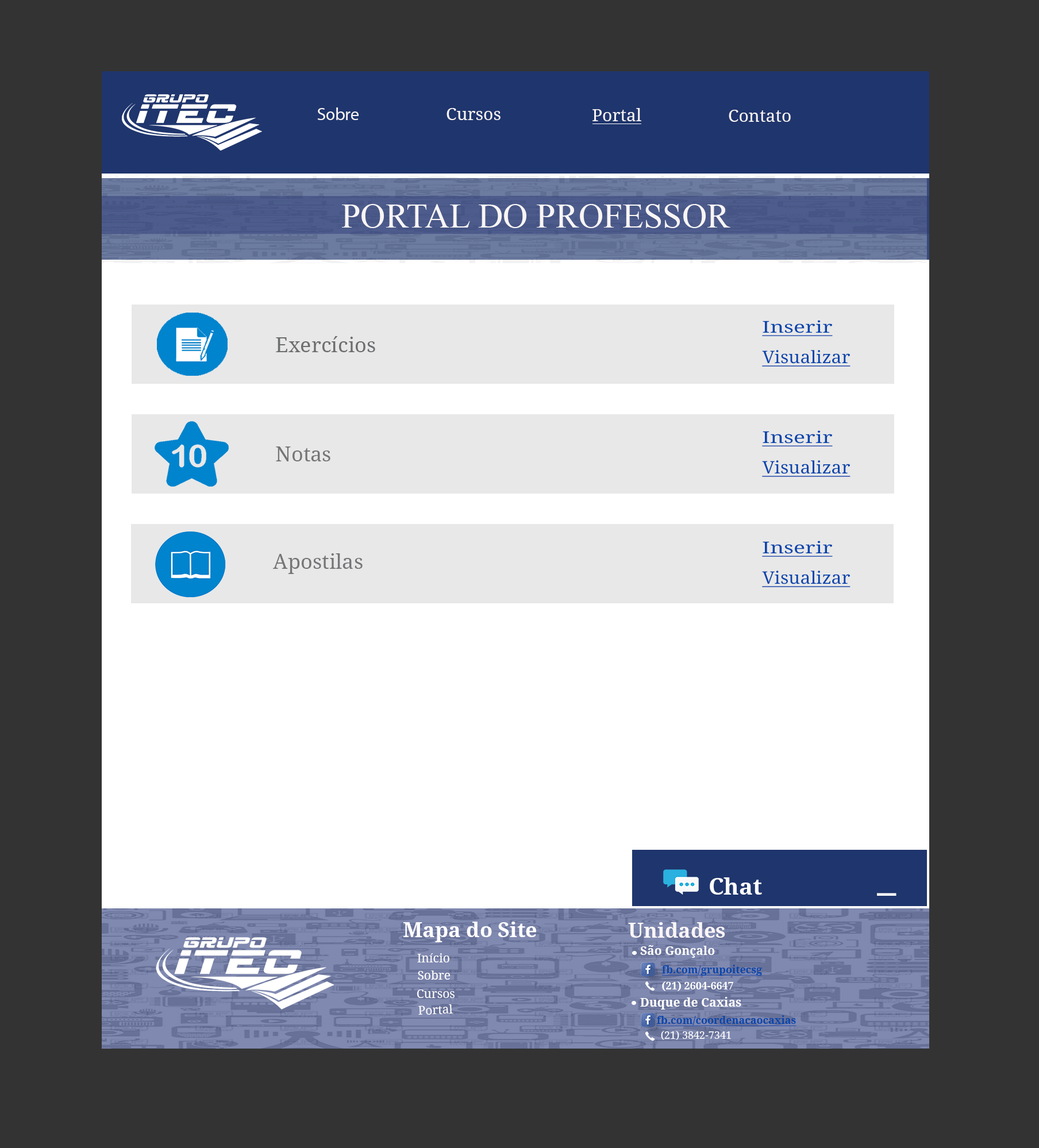
<style>
.page{position:relative;width:1039px;height:1148px;background:#333333}
.page>*{position:absolute;margin:0}
.t1{font:17.2px "MyriadPro-Regular";color:#f9f5f5}
.t2{font:17.2px "DroidSerif";color:#f9f5f5}
.t3{font:34.5px "TimesNewRomanPSMT";color:#f9f5f5}
.t4{font:16.2px "DroidSerif";color:#0645ad;text-decoration:underline;scale:1.33 1}
.t5{font:20.7px "DroidSerif";color:#6d6e70}
.t6{font:17.2px "DroidSerif";color:#0645ad;text-decoration:underline;scale:1.06 1}
.t7{font:20.7px "DroidSerif";color:#757578}
.t8{font:23px "DroidSerif-Bold";color:#fdfdfd}
.t9{font:41.4px "DroidSerif-Bold";color:#fdfdfd}
.t10{font:20.7px "DroidSerif-Bold";color:#fdfdfe}
.t11{font:20.7px "DroidSerif-Bold";color:#f9f5f5}
.t12{font:12.1px "DroidSerif";color:#fdfdfe}
.t13{font:12.1px "DroidSerif-Bold";color:#fdfdfe}
.t14{font:10.3px "DroidSerif-Bold";color:#0645ad;text-decoration:underline}
.t15{font:10.3px "DroidSerif-Bold";color:#ffffff}
.t16{font:12.1px "DroidSerif-Bold";color:#ffffff}
.t17{font:10.3px "DroidSerif";color:#ffffff}
</style>
<div class="page">
<p class="t1" style="left:317px;top:107px;width:42px;height:13px">Sobre</p>
<p class="t2" style="left:446px;top:108px;width:54px;height:12px">Cursos</p>
<p class="t2" style="left:592px;top:108px;width:49px;height:13px">Portal</p>
<p class="t2" style="left:729px;top:110px;width:62px;height:12px">Contato</p>
<p class="t3" style="left:342px;top:204px;width:388px;height:24px">PORTAL DO PROFESSOR</p>
<p class="t4" style="left:762px;top:320px;width:71px;height:16px">Inserir</p>
<p class="t5" style="left:276px;top:336px;width:99px;height:16px">Exercícios</p>
<p class="t6" style="left:762px;top:350px;width:88px;height:17px">Visualizar</p>
<p class="t4" style="left:762px;top:430px;width:71px;height:16px">Inserir</p>
<p class="t7" style="left:276px;top:446px;width:54px;height:15px">Notas</p>
<p class="t6" style="left:762px;top:460px;width:88px;height:17px">Visualizar</p>
<p class="t4" style="left:762px;top:541px;width:71px;height:16px">Inserir</p>
<p class="t7" style="left:273px;top:553px;width:90px;height:21px">Apostilas</p>
<p class="t6" style="left:762px;top:571px;width:88px;height:16px">Visualizar</p>
<p class="t8" style="left:710px;top:877px;width:52px;height:18px">Chat</p>
<p class="t9" style="left:877px;top:893px;width:19px;height:3px">_</p>
<p class="t10" style="left:403px;top:922px;width:133px;height:20px">Mapa do Site</p>
<p class="t11" style="left:628px;top:922px;width:97px;height:16px">Unidades</p>
<p class="t12" style="left:417px;top:953px;width:32px;height:9px">Início</p>
<p class="t13" style="left:640px;top:945px;width:75px;height:13px">São Gonçalo</p>
<p class="t14" style="left:661px;top:965px;width:101px;height:11px">fb.com/grupoitecsg</p>
<p class="t12" style="left:418px;top:970px;width:32px;height:10px">Sobre</p>
<p class="t12" style="left:417px;top:989px;width:37px;height:9px">Cursos</p>
<p class="t15" style="left:662px;top:981px;width:71px;height:10px">(21) 2604-6647</p>
<p class="t16" style="left:640px;top:997px;width:101px;height:12px">Duque de Caxias</p>
<p class="t12" style="left:418px;top:1004px;width:35px;height:11px;rotate:-2deg">Portal</p>
<p class="t14" style="left:656px;top:1015px;width:140px;height:11px">fb.com/coordenacaocaxias</p>
<p class="t17" style="left:661px;top:1031px;width:70px;height:9px">(21) 3842-7341</p>
</div>
